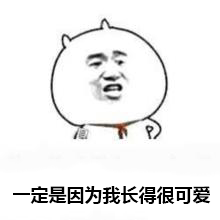
<style>
.page{position:relative;width:220px;height:220px;background:#ffffff}
.page>*{position:absolute;margin:0}
.t1{font:18px "MicrosoftYaHei-Bold";color:#000000}
</style>
<div class="page">
<p class="t1" style="left:13px;top:186px;width:198px;height:18px">一定是因为我长得很可爱</p>
</div>
